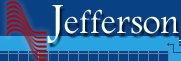
<style>
.page{position:relative;width:181px;height:61px;background:#084284}
.page>*{position:absolute;margin:0}
.t1{font:35px "FootlightMTLight";color:#ffffff}
.t2{font:45px "FootlightMTLight";color:#ffffff}
</style>
<div class="page">
<p class="t1" style="left:47px;top:5px;width:132px;height:38px"><span class="t2">J</span>efferson</p>
</div>
